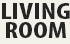
<style>
.page{position:relative;width:70px;height:44px;background:#f3f1e9}
.page>*{position:absolute;margin:0}
.t1{font:23px/19px "MyriadPro-BoldCond";color:#252525;scale:1.33 1}
</style>
<div class="page">
<p class="t1" style="left:2px;top:3px;width:68px;height:35px;text-align:center">LIVING<br>ROOM</p>
</div>
